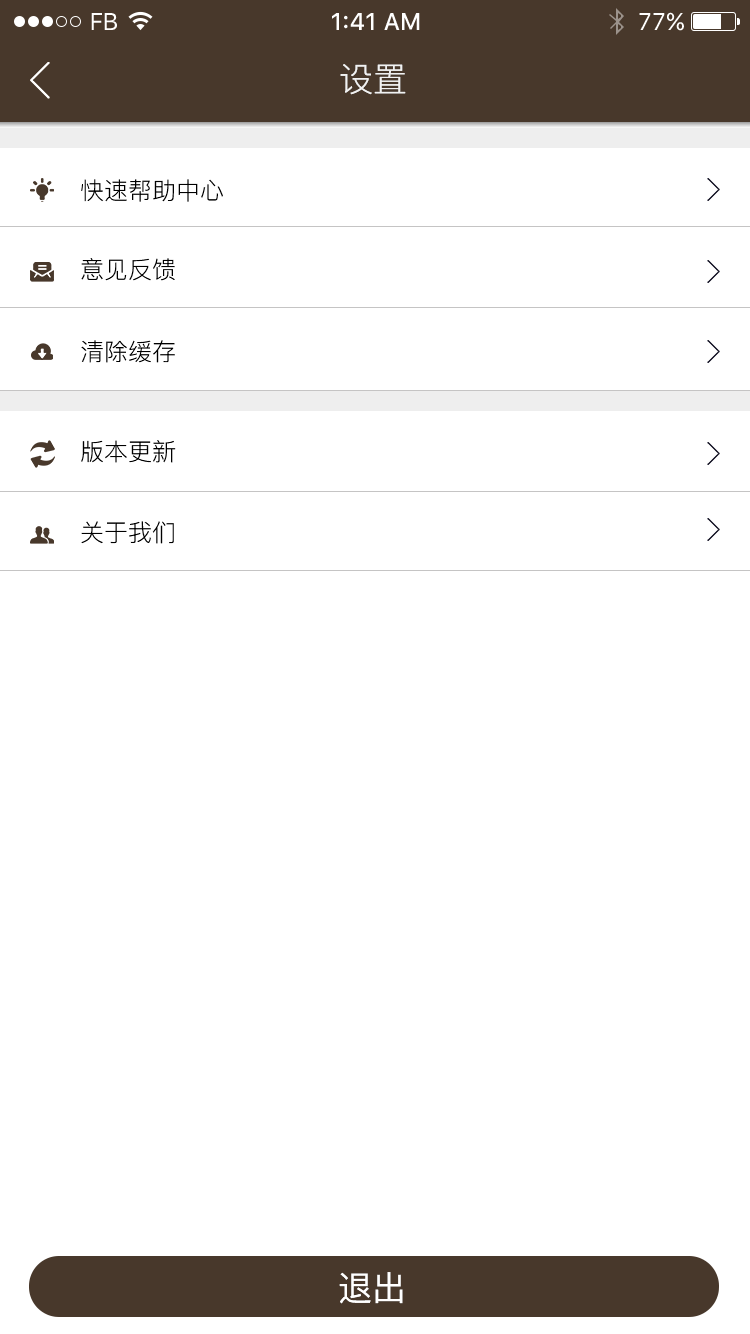
<style>
.page{position:relative;width:750px;height:1334px;background:#ffffff}
.page>*{position:absolute;margin:0}
.t1{font:24px "SFUIText-Regular";letter-spacing:-0.025em;color:#ffffff}
.t2{font:24px "SFUIText-Medium";color:#ffffff}
.t3{font:24px "SFUIText-Regular";color:#ffffff}
.t4{font:34px "PingFang-SC-Regular";color:#f1f1f1}
.t5{font:24px "PingFang-SC-Regular";color:#000000}
.t6{font:34px "PingFang-SC-Medium";color:#ffffff}
</style>
<div class="page">
<p class="t1" style="left:91px;top:13px;width:26px;height:17px">FB</p>
<p class="t2" style="left:332px;top:13px;width:88px;height:17px">1:41 AM</p>
<p class="t3" style="left:639px;top:12px;width:45px;height:19px">77%</p>
<p class="t4" style="left:340px;top:64px;width:66px;height:31px">设置</p>
<p class="t5" style="left:81px;top:179px;width:142px;height:23px">快速帮助中心</p>
<p class="t5" style="left:81px;top:258px;width:94px;height:23px">意见反馈</p>
<p class="t5" style="left:81px;top:340px;width:94px;height:23px">清除缓存</p>
<p class="t5" style="left:81px;top:440px;width:95px;height:23px">版本更新</p>
<p class="t5" style="left:81px;top:521px;width:93px;height:23px">关于我们</p>
<p class="t6" style="left:339px;top:1272px;width:64px;height:32px">退出</p>
</div>
